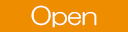
<style>
.page{position:relative;width:128px;height:32px;background:#ef8d00}
.page>*{position:absolute;margin:0}
.t1{font:24px "HGMaruGothicMPRO";color:#ffffff}
</style>
<div class="page">
<p class="t1" style="left:31px;top:5px;width:66px;height:23px">Open</p>
</div>
